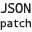
<style>
.page{position:relative;width:32px;height:32px;background:#ffffff}
.page>*{position:absolute;margin:0}
.t1{font:13.4px "DroidSansMono";color:#202020}
.t2{font:11px "DroidSansMono";color:#202020}
</style>
<div class="page">
<p class="t1" style="left:0px;top:3px;width:31px;height:10px">JSON</p>
<p class="t2" style="left:0px;top:18px;width:31px;height:12px">patch</p>
</div>
